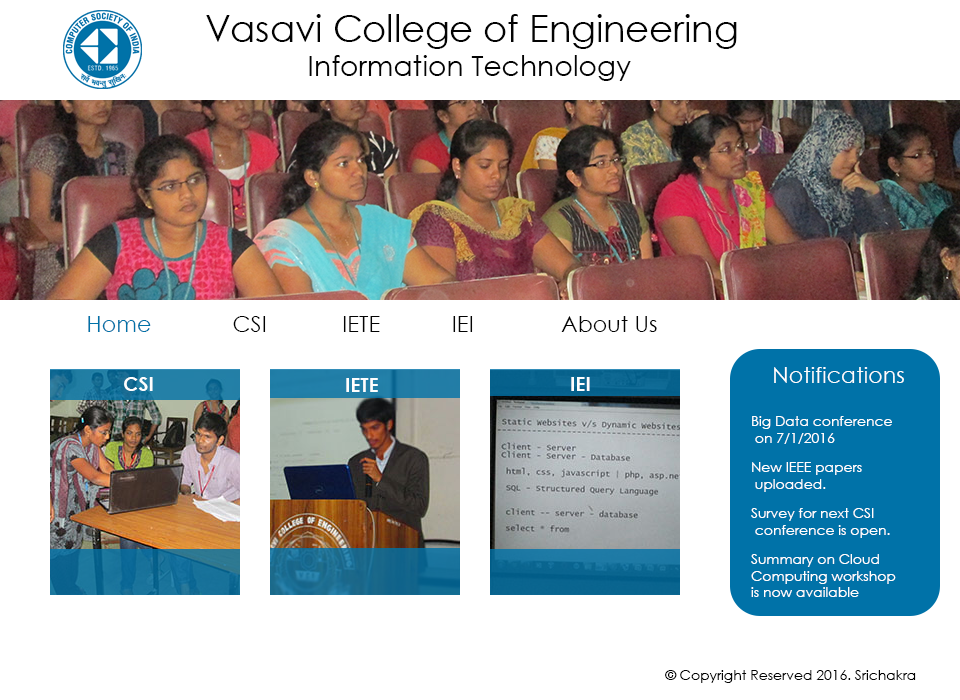
<style>
.page{position:relative;width:960px;height:700px;background:#ffffff}
.page>*{position:absolute;margin:0}
.t1{font:36.6px "CenturyGothic";color:#030303}
.t2{font:28.2px "CenturyGothic";color:#030303}
.t3{font:22.2px "CenturyGothic";color:#030303}
.t4{font:22.2px "CenturyGothic";color:#0072a8}
.t5{font:22.2px "CenturyGothic";color:#000000}
.t6{font:19.4px "CenturyGothic-Bold";color:#fefefe}
.t7{font:22.2px "CenturyGothic";color:#ffffff}
.t8{font:13.9px/16.7px "CenturyGothic";color:#ffffff}
.t9{font:13.9px "CenturyGothic";color:#010101}
</style>
<div class="page">
<p class="t1" style="left:206px;top:14px;width:531px;height:35px">Vasavi College of Engineering</p>
<p class="t2" style="left:309px;top:55px;width:322px;height:26px">Information Technology</p>
<p class="t3" style="left:88px;top:316px;width:569px;height:16px"><span class="t4">Home   </span><span class="t5">CSI </span>  IETE  IEI   About Us</p>
<p class="t6" style="left:124px;top:377px;width:29px;height:14px">CSI</p>
<p class="t6" style="left:571px;top:377px;width:19px;height:14px">IEI</p>
<p class="t7" style="left:774px;top:367px;width:130px;height:16px">Notifications</p>
<p class="t6" style="left:346px;top:378px;width:32px;height:14px">IETE</p>
<p class="t8" style="left:752px;top:416px;width:140px;height:28px">Big Data conference<br> on 7/1/2016</p>
<p class="t8" style="left:752px;top:462px;width:110px;height:30px">New IEEE papers <br> uploaded.</p>
<p class="t8" style="left:751px;top:508px;width:139px;height:30px">Survey for next CSI <br> conference is open.</p>
<p class="t8" style="left:751px;top:554px;width:145px;height:43px">Summary on Cloud <br>Computing workshop <br>is now available</p>
<p class="t9" style="left:665px;top:670px;width:251px;height:13px">© Copyright Reserved 2016. Srichakra</p>
</div>
